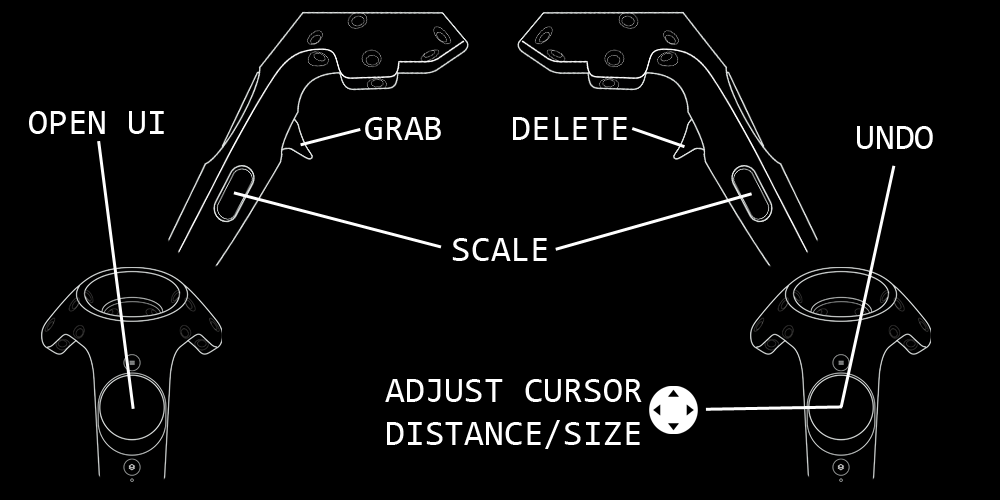
<style>
.page{position:relative;width:1000px;height:500px;background:#000000}
.page>*{position:absolute;margin:0}
.t1{font:36px "Consolas";color:#ffffff}
</style>
<div class="page">
<p class="t1" style="left:29px;top:111px;width:135px;height:23px">OPEN UI</p>
<p class="t1" style="left:365px;top:117px;width:76px;height:23px">GRAB</p>
<p class="t1" style="left:513px;top:117px;width:114px;height:23px">DELETE</p>
<p class="t1" style="left:857px;top:126px;width:76px;height:23px">UNDO</p>
<p class="t1" style="left:452px;top:238px;width:95px;height:23px">SCALE</p>
<p class="t1" style="left:385px;top:379px;width:257px;height:70px">ADJUST CURSOR<br>DISTANCE/SIZE</p>
</div>
